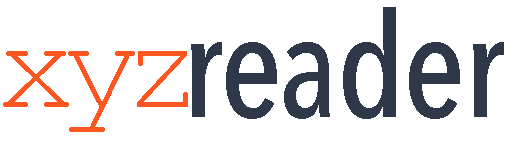
<style>
.page{position:relative;width:506px;height:144px;background:#ffffff}
.page>*{position:absolute;margin:0}
.t1{font:144.9px "AvenirNextCondensed-Medium";letter-spacing:-0.02em;color:#2f3848}
.t2{font:130.9px "CourierNewPSMT";letter-spacing:-0.12em;color:#fd5621}
</style>
<div class="page">
<p class="t1" style="left:191px;top:7px;width:313px;height:112px">reader</p>
<p class="t2" style="left:3px;top:51px;width:185px;height:81px">xyz</p>
</div>
